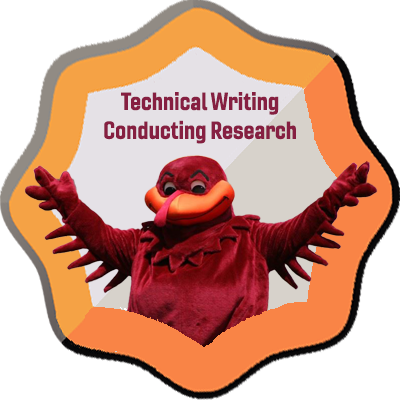
<style>
.page{position:relative;width:400px;height:400px;background:#ffffff}
.page>*{position:absolute;margin:0}
.t1{font:24px "Gineso-ConBol";color:#861f41}
</style>
<div class="page">
<p class="t1" style="left:104px;top:92px;width:192px;height:52px;text-align:center">Technical Writing<br>Conducting Research</p>
</div>
